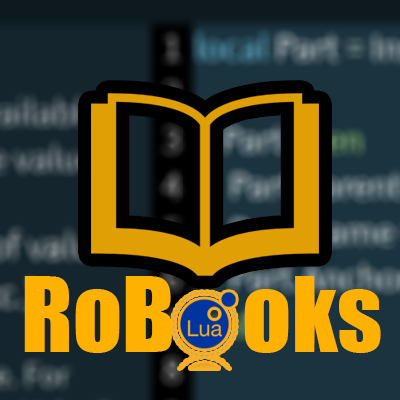
<style>
.page{position:relative;width:400px;height:400px}
.page>*{position:absolute;margin:0}
.t1{font:96px "Impact";color:#fbae01}
</style>
<div class="page">
<p class="t1" style="left:24px;top:276px;width:357px;height:77px">RoB    oks</p>
</div>
